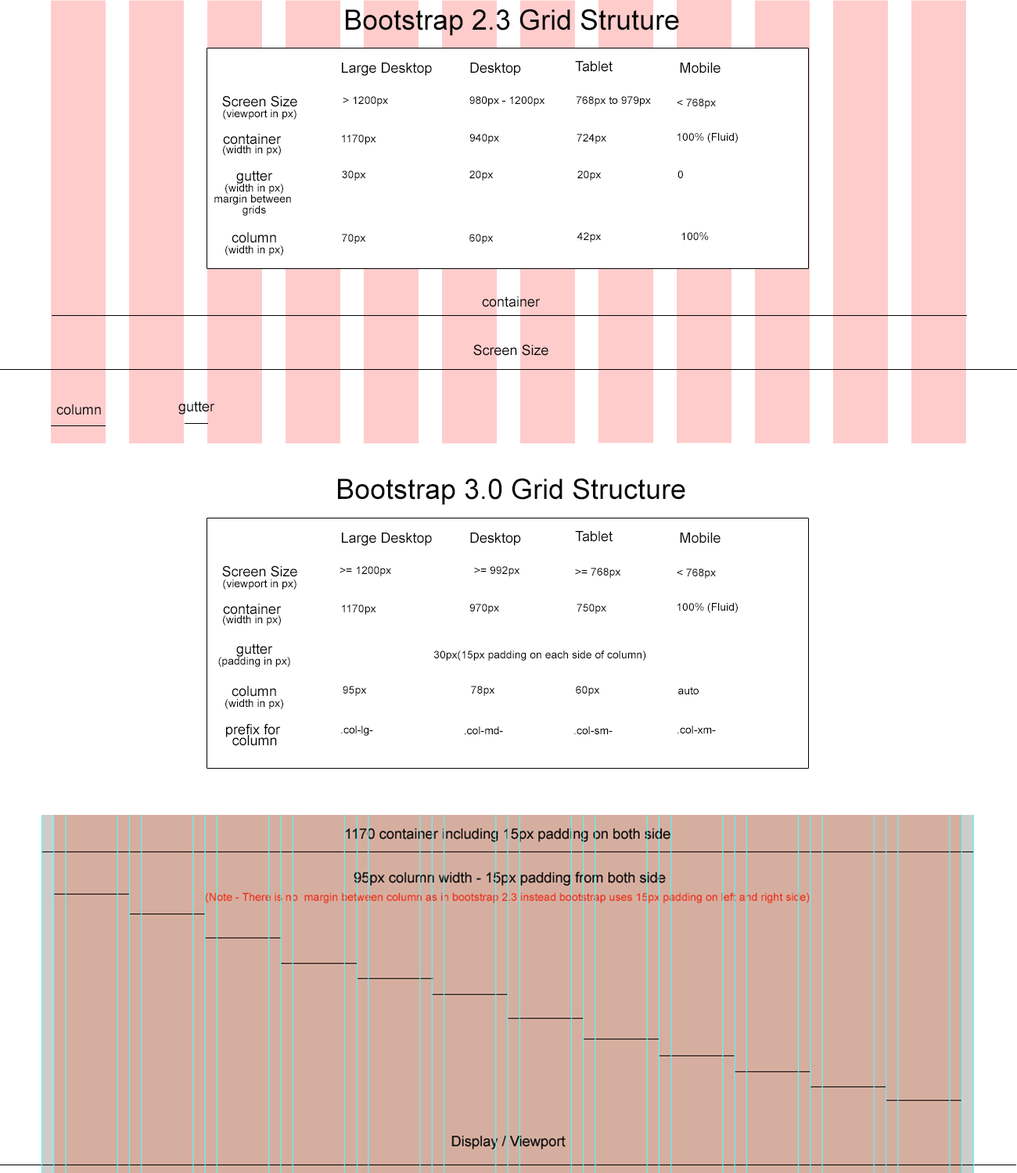
<style>
.page{position:relative;width:1017px;height:1173px;background:#ffffff}
.page>*{position:absolute;margin:0}
.t1{font:28.2px "ArialMT";color:#050505}
.t2{font:14.1px "ArialMT";color:#050505}
.t3{font:10.9px/10.9px "ArialMT";color:#050505}
.t4{font:14.1px/10.9px "ArialMT";color:#050505}
.t5{font:10.9px "ArialMT";color:#050505}
.t6{font:10.9px/9.4px "ArialMT";color:#050505}
.t7{font:14.1px/9.4px "ArialMT";color:#050505}
.t8{font:9.4px/9.4px "ArialMT";color:#050505}
.t9{font:14.1px/10.9px "ArialMT";color:#000000}
.t10{font:10.9px "ArialMT";color:#000000}
</style>
<div class="page">
<p class="t1" style="left:346px;top:9px;width:333px;height:27px">Bootstrap 2.3 Grid Struture</p>
<p class="t2" style="left:342px;top:63px;width:90px;height:13px">Large Desktop</p>
<p class="t2" style="left:470px;top:63px;width:51px;height:13px">Desktop</p>
<p class="t2" style="left:575px;top:61px;width:37px;height:11px">Tablet</p>
<p class="t2" style="left:680px;top:63px;width:40px;height:11px">Mobile</p>
<p class="t3" style="left:222px;top:95px;width:75px;height:25px;text-align:center"><span class="t4">Screen Size</span><br>(viewport in px)</p>
<p class="t5" style="left:343px;top:96px;width:45px;height:10px">&gt; 1200px</p>
<p class="t5" style="left:469px;top:96px;width:76px;height:10px">980px - 1200px</p>
<p class="t5" style="left:576px;top:96px;width:75px;height:10px">768px to 979px</p>
<p class="t5" style="left:676px;top:99px;width:40px;height:10px">&lt; 768px</p>
<p class="t6" style="left:223px;top:134px;width:59px;height:22px;text-align:center"><span class="t7">container</span><span class="t8"><br></span>(width in px)</p>
<p class="t5" style="left:342px;top:135px;width:34px;height:10px">1170px</p>
<p class="t5" style="left:469px;top:134px;width:30px;height:10px">940px</p>
<p class="t5" style="left:576px;top:134px;width:30px;height:10px">724px</p>
<p class="t5" style="left:676px;top:133px;width:61px;height:10px">100% (Fluid)</p>
<p class="t3" style="left:214px;top:170px;width:77px;height:46px;text-align:center"><span class="t4">gutter</span><br>(width in px)<br>margin between <br>grids</p>
<p class="t5" style="left:342px;top:170px;width:24px;height:11px">30px</p>
<p class="t5" style="left:469px;top:170px;width:24px;height:11px">20px</p>
<p class="t5" style="left:577px;top:170px;width:24px;height:11px">20px</p>
<p class="t5" style="left:677px;top:170px;width:6px;height:8px">0</p>
<p class="t3" style="left:225px;top:232px;width:58px;height:24px;text-align:center"><span class="t4">column<br></span>(width in px)</p>
<p class="t5" style="left:342px;top:234px;width:24px;height:10px">70px</p>
<p class="t5" style="left:469px;top:234px;width:24px;height:10px">60px</p>
<p class="t5" style="left:577px;top:232px;width:24px;height:10px">42px</p>
<p class="t5" style="left:681px;top:232px;width:27px;height:8px">100%</p>
<p class="t2" style="left:482px;top:296px;width:58px;height:11px">container</p>
<p class="t2" style="left:473px;top:344px;width:75px;height:12px">Screen Size</p>
<p class="t2" style="left:178px;top:401px;width:37px;height:13px">gutter</p>
<p class="t2" style="left:56px;top:404px;width:45px;height:11px">column</p>
<p class="t1" style="left:338px;top:478px;width:347px;height:27px">Bootstrap 3.0 Grid Structure</p>
<p class="t2" style="left:342px;top:533px;width:90px;height:13px">Large Desktop</p>
<p class="t2" style="left:470px;top:533px;width:51px;height:13px">Desktop</p>
<p class="t2" style="left:575px;top:531px;width:37px;height:11px">Tablet</p>
<p class="t2" style="left:680px;top:533px;width:40px;height:10px">Mobile</p>
<p class="t3" style="left:222px;top:565px;width:75px;height:25px;text-align:center"><span class="t4">Screen Size</span><br>(viewport in px)</p>
<p class="t5" style="left:339px;top:566px;width:52px;height:10px">&gt;= 1200px</p>
<p class="t5" style="left:474px;top:566px;width:46px;height:10px">&gt;= 992px</p>
<p class="t5" style="left:575px;top:568px;width:46px;height:10px">&gt;= 768px</p>
<p class="t5" style="left:676px;top:569px;width:40px;height:10px">&lt; 768px</p>
<p class="t6" style="left:223px;top:604px;width:59px;height:22px;text-align:center"><span class="t7">container</span><span class="t8"><br></span>(width in px)</p>
<p class="t5" style="left:342px;top:604px;width:34px;height:11px">1170px</p>
<p class="t5" style="left:469px;top:604px;width:30px;height:10px">970px</p>
<p class="t5" style="left:576px;top:604px;width:30px;height:10px">750px</p>
<p class="t5" style="left:676px;top:603px;width:61px;height:10px">100% (Fluid)</p>
<p class="t3" style="left:218px;top:644px;width:72px;height:23px;text-align:center"><span class="t4">gutter</span><br>(padding in px)</p>
<p class="t5" style="left:434px;top:651px;width:212px;height:10px">30px(15px padding on each side of column)</p>
<p class="t3" style="left:225px;top:686px;width:58px;height:23px;text-align:center"><span class="t4">column<br></span>(width in px)</p>
<p class="t5" style="left:343px;top:686px;width:24px;height:10px">95px</p>
<p class="t5" style="left:471px;top:686px;width:24px;height:10px">78px</p>
<p class="t5" style="left:576px;top:686px;width:24px;height:10px">60px</p>
<p class="t5" style="left:678px;top:687px;width:20px;height:7px">auto</p>
<p class="t9" style="left:226px;top:723px;width:55px;height:23px;text-align:center">prefix for<br> column</p>
<p class="t10" style="left:341px;top:726px;width:32px;height:10px">.col-lg-</p>
<p class="t10" style="left:677px;top:726px;width:39px;height:8px">.col-xm-</p>
<p class="t10" style="left:465px;top:726px;width:38px;height:8px">.col-md-</p>
<p class="t10" style="left:574px;top:726px;width:38px;height:8px">.col-sm-</p>
</div>
